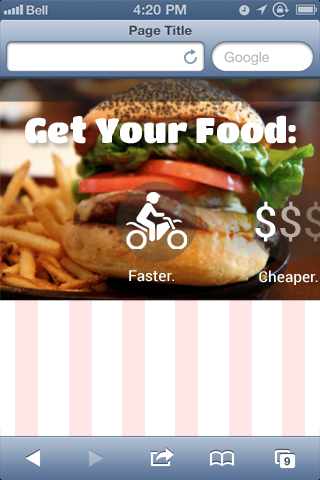
<style>
.page{position:relative;width:320px;height:480px;background:#ffffff}
.page>*{position:absolute;margin:0}
.t1{font:35.1px "TitanOne";color:#ffffff}
.t2{font:42.6px "RobotoCondensed-Regular";color:#ffffff;scale:1.19 1}
.t3{font:42.6px "RobotoCondensed-Regular";color:#b7aba5;scale:1.19 1}
.t4{font:15px "RobotoCondensed-Regular";color:#ffffff;scale:1.19 1}
</style>
<div class="page">
<p class="t1" style="left:25px;top:115px;width:271px;height:29px">Get Your Food:</p>
<p class="t2" style="left:255px;top:201px;width:21px;height:41px">$</p>
<p class="t3" style="left:280px;top:201px;width:21px;height:41px">$</p>
<p class="t4" style="left:129px;top:270px;width:45px;height:12px">Faster.</p>
<p class="t4" style="left:259px;top:270px;width:59px;height:15px">Cheaper.</p>
</div>
